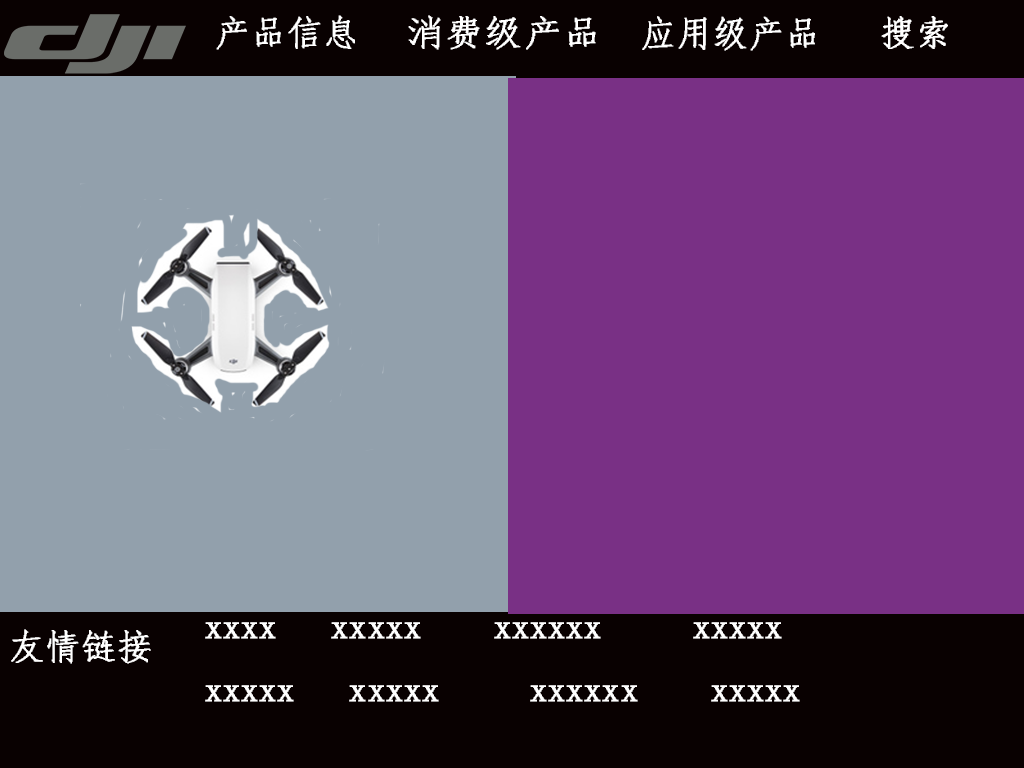
<style>
.page{position:relative;width:1024px;height:768px;background:#793085}
.page>*{position:absolute;margin:0}
.t1{font:35.6px "·ÂËÎ";color:#ffffff;font-weight:bold}
.t2{font:35.6px "·ÂËÎ";color:#ffffff;font-weight:bold;scale:1.1 1}
.t3{font:36px "·ÂËÎ";color:#ffffff;font-weight:bold}
</style>
<div class="page">
<p class="t1" style="left:216px;top:15px;width:139px;height:35px">产品信息</p>
<p class="t2" style="left:408px;top:15px;width:188px;height:35px">消费级产品</p>
<p class="t3" style="left:642px;top:16px;width:173px;height:35px">应用级产品</p>
<p class="t1" style="left:881px;top:16px;width:67px;height:33px">搜索</p>
<p class="t1" style="left:11px;top:629px;width:140px;height:35px">友情链接</p>
<p class="t3" style="left:205px;top:622px;width:595px;height:80px">xxxx   xxxxx    xxxxxx     xxxxx<br>xxxxx   xxxxx     xxxxxx    xxxxx</p>
</div>
